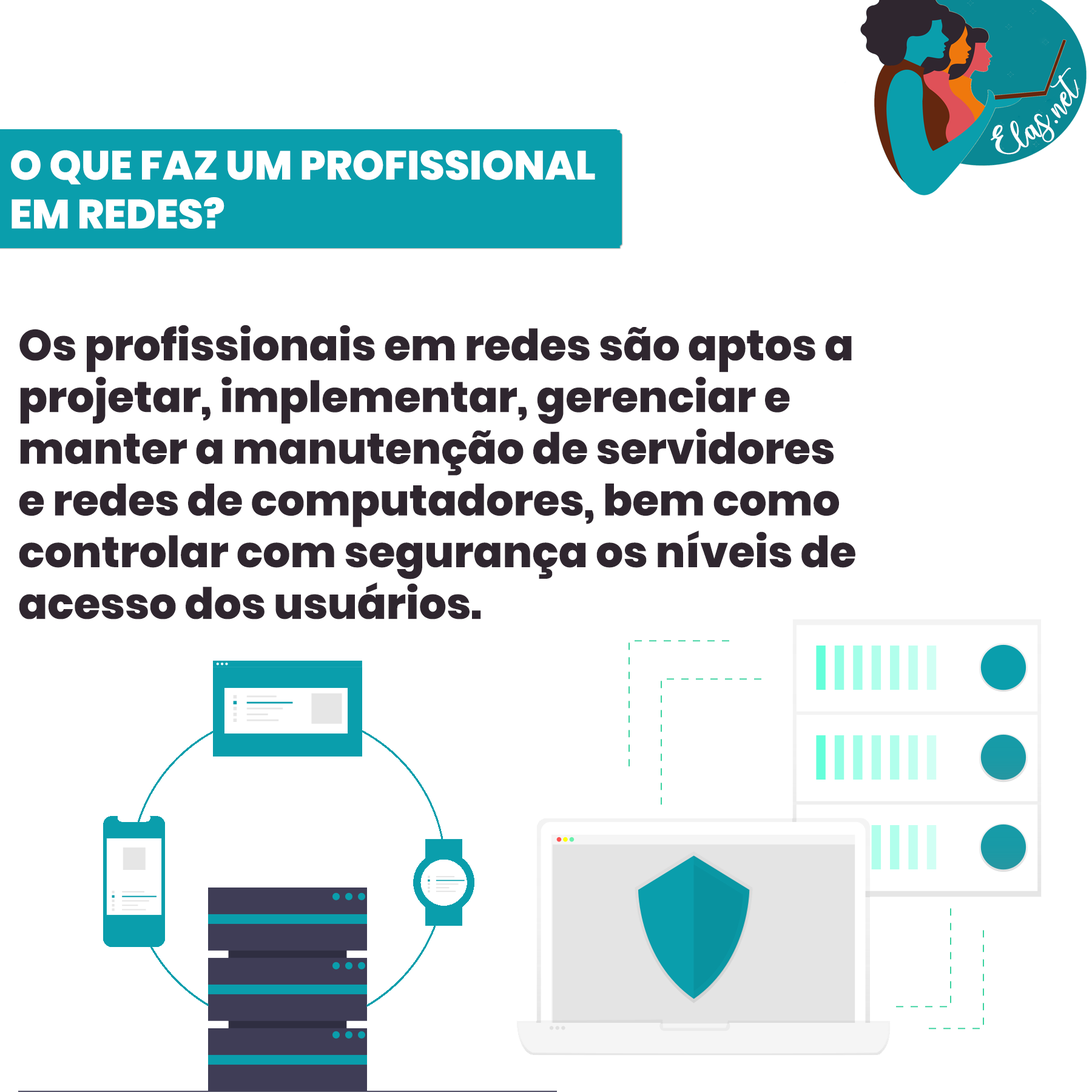
<style>
.page{position:relative;width:1092px;height:1092px;background:#ffffff}
.page>*{position:absolute;margin:0}
.t1{font:25px "charlinda-Regular";color:#ffffff;scale:1.18 1}
.t2{font:40.6px "Poppins-ExtraBold";color:#ffffff;text-transform:uppercase}
.t3{font:43.1px "Poppins-ExtraBold";color:#2f262f}
</style>
<div class="page">
<p class="t1" style="left:991px;top:67px;width:88px;height:88px;rotate:-42deg">Elas.net</p>
<p class="t2" style="left:11px;top:150px;width:584px;height:79px">O que faz um profissional<br>em redes?</p>
<p class="t3" style="left:19px;top:325px;width:836px;height:294px">Os profissionais em redes são aptos a <br>projetar, implementar, gerenciar e <br>manter a manutenção de servidores <br>e redes de computadores, bem como<br>controlar com segurança os níveis de <br>acesso dos usuários.</p>
</div>
